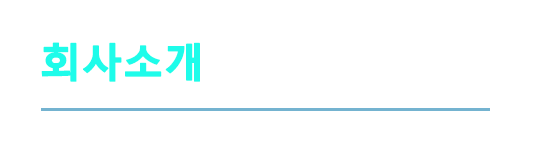
<style>
.page{position:relative;width:533px;height:147px;background:#ffffff}
.page>*{position:absolute;margin:0}
.t1{font:40px "MalgunGothicBold";color:#1efcea;font-weight:bold}
</style>
<div class="page">
<p class="t1" style="left:41px;top:42px;width:159px;height:40px">회사소개</p>
</div>
